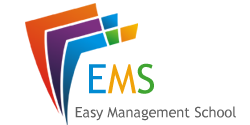
<style>
.page{position:relative;width:250px;height:125px;background:#ffffff}
.page>*{position:absolute;margin:0}
.t1{font:40.6px "TrebuchetMS";color:#028bd2}
.t2{font:40.6px "TrebuchetMS";color:#f0a209}
.t3{font:40.6px "TrebuchetMS";color:#40a532}
.t4{font:14.6px "TrebuchetMS";color:#616161}
</style>
<div class="page">
<p class="t1" style="left:89px;top:63px;width:65px;height:31px">E<span class="t2">M</span><span class="t3">S</span></p>
<p class="t4" style="left:75px;top:106px;width:161px;height:15px">Easy Management School</p>
</div>
